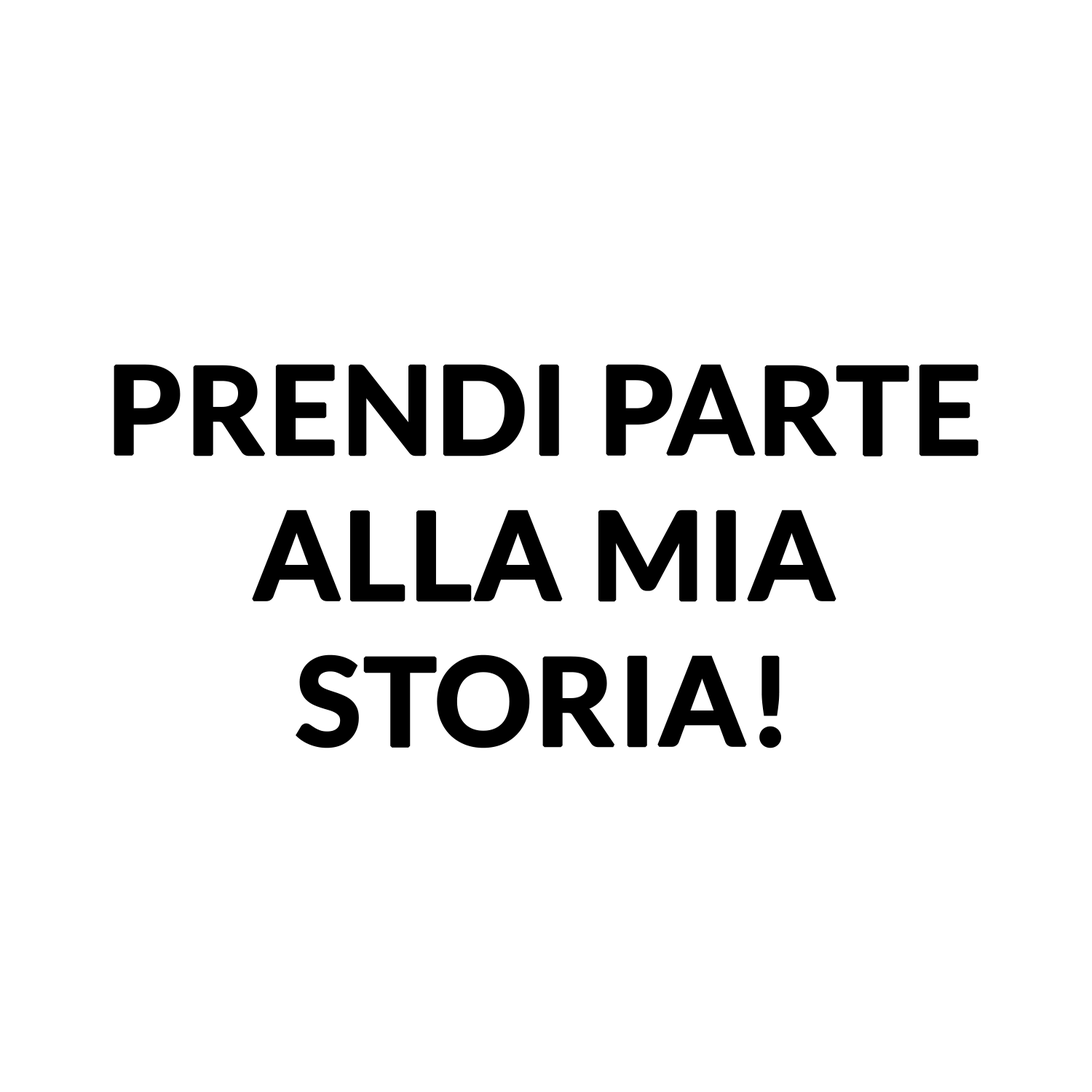
<style>
.page{position:relative;width:1092px;height:1092px;background:#ffffff}
.page>*{position:absolute;margin:0}
.t1{font:121.3px "Lato-Bold";color:#000000;font-weight:bold}
</style>
<div class="page">
<p class="t1" style="left:114px;top:364px;width:864px;height:384px;text-align:center">PRENDI PARTE<br>ALLA MIA<br>STORIA!</p>
</div>
